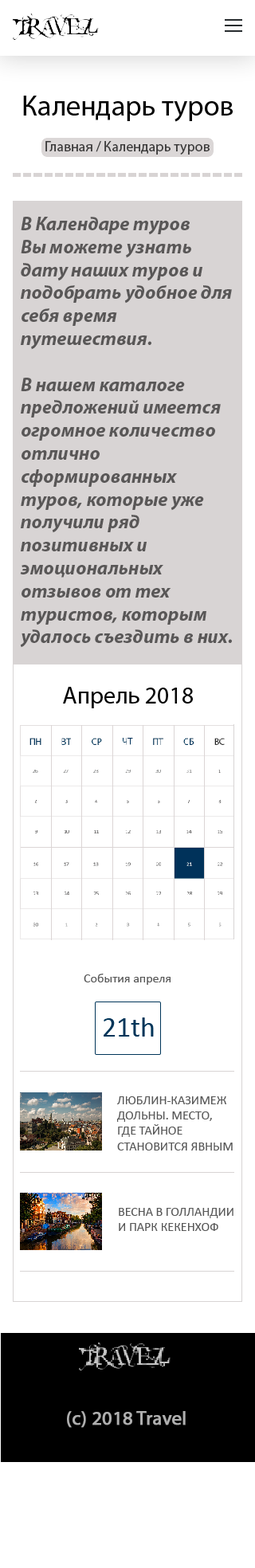
<style>
.page{position:relative;width:255px;height:1568px;background:#ffffff}
.page>*{position:absolute;margin:0}
.t1{font:19.1px "MyriadPro-BoldIt";color:#595757}
.t2{font:12.7px "Calibri";color:#585858}
</style>
<div class="page">
<p class="t1" style="left:20px;top:217px;width:212px;height:431px">В Календаре туров <br>Вы можете узнать <br>дату наших туров и <br>подобрать удобное для <br>себя время <br>путешествия.<br><br>В нашем каталоге <br>предложений имеется <br>огромное количество <br>отлично <br>сформированных <br>туров, которые уже <br>получили ряд <br>позитивных и <br>эмоциональных <br>отзывов от тех <br>туристов, которым <br>удалось съездить в них.</p>
<p class="t2" style="left:84px;top:974px;width:87px;height:11px">События апреля</p>
<p class="t2" style="left:117px;top:1096px;width:116px;height:55px">ЛЮБЛИН-КАЗИМЕЖ<br>ДОЛЬНЫ. МЕСТО, <br>ГДЕ ТАЙНОЕ <br>СТАНОВИТСЯ ЯВНЫМ</p>
<p class="t2" style="left:119px;top:1208px;width:114px;height:23px">ВЕСНА В ГОЛЛАНДИИ<br>И ПАРК КЕКЕНХОФ</p>
</div>
